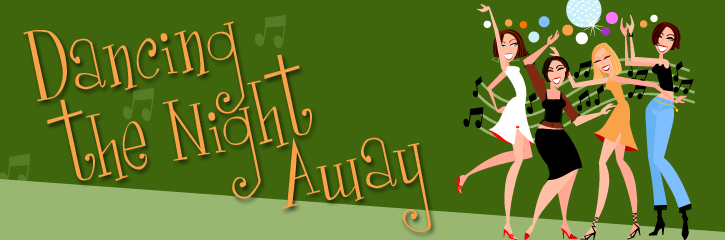
<style>
.page{position:relative;width:725px;height:240px;background:#3f660c}
.page>*{position:absolute;margin:0}
.t1{font:91.8px "GirlsareWeird";color:#faa248}
</style>
<div class="page">
<p class="t1" style="left:23px;top:21px;width:222px;height:93px;rotate:-11deg">Dancing</p>
<p class="t1" style="left:47px;top:54px;width:265px;height:145px;rotate:-12deg">the Night</p>
<p class="t1" style="left:282px;top:137px;width:149px;height:95px;rotate:-11deg">Away</p>
</div>
